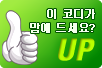
<style>
.page{position:relative;width:102px;height:68px}
.page>*{position:absolute;margin:0}
.t1{font:11px/14px "Dotum";letter-spacing:-0.075em;color:#f5ffed;font-weight:bold}
.t2{font:30px "Univeconbolobl";color:#baff00;font-weight:bold}
</style>
<div class="page">
<p class="t1" style="left:30px;top:9px;width:65px;height:24px;text-align:right">이 코디가<br>맘에 드세요?</p>
<p class="t2" style="left:58px;top:38px;width:37px;height:23px">UP</p>
</div>
